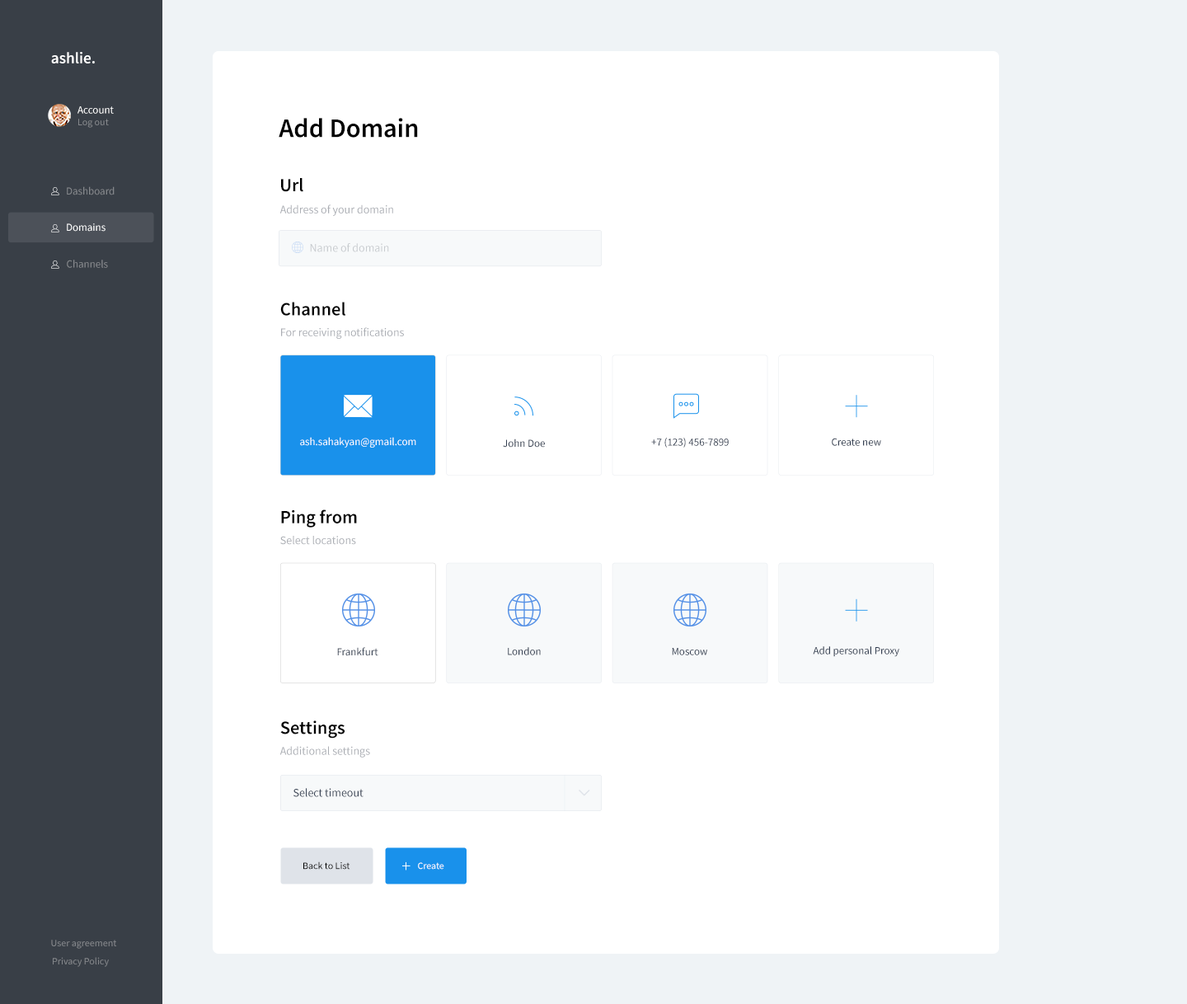
<style>
.page{position:relative;width:1187px;height:1004px;background:#ffffff}
.page>*{position:absolute;margin:0}
.t1{font:15.9px "SourceSansPro-SemiBold";color:#ffffff}
.t2{font:10.7px "SourceSansPro-Regular";color:#ffffff}
.t3{font:9.9px "SourceSansPro-Regular";color:#85888c}
.t4{font:26.8px "SourceSansPro-SemiBold";color:#000000}
.t5{font:18.6px "SourceSansPro-SemiBold";color:#000000}
.t6{font:10.7px "SourceSansPro-Regular";color:#85888c}
.t7{font:11.5px "SourceSansPro-Regular";color:#abaeb4}
.t8{font:11.5px "SourceSansPro-Regular";color:#c8cccf}
.t9{font:10.7px "SourceSansPro-Regular";color:#354052}
.t10{font:11.5px "SourceSansPro-Regular";color:#354052}
.t11{font:9.9px "SourceSansPro-Regular";color:#000000}
.t12{font:9.9px "SourceSansPro-Regular";color:#ffffff}
</style>
<div class="page">
<p class="t1" style="left:51px;top:52px;width:44px;height:11px">ashlie.</p>
<p class="t2" style="left:78px;top:106px;width:36px;height:8px">Account</p>
<p class="t3" style="left:78px;top:119px;width:31px;height:9px">Log out</p>
<p class="t4" style="left:279px;top:118px;width:139px;height:20px">Add Domain</p>
<p class="t5" style="left:281px;top:178px;width:22px;height:14px">Url</p>
<p class="t6" style="left:67px;top:186px;width:48px;height:9px">Dashboard</p>
<p class="t7" style="left:280px;top:204px;width:113px;height:12px">Address of your domain</p>
<p class="t2" style="left:67px;top:223px;width:39px;height:9px">Domains</p>
<p class="t8" style="left:310px;top:243px;width:79px;height:9px">Name of domain</p>
<p class="t6" style="left:67px;top:260px;width:41px;height:8px">Channels</p>
<p class="t5" style="left:280px;top:302px;width:65px;height:14px">Channel</p>
<p class="t7" style="left:281px;top:327px;width:123px;height:12px">For receiving notifications</p>
<p class="t2" style="left:300px;top:437px;width:116px;height:11px">ash.sahakyan@gmail.com</p>
<p class="t9" style="left:651px;top:438px;width:78px;height:10px">+7 (123) 456-7899</p>
<p class="t9" style="left:832px;top:438px;width:49px;height:8px">Create new</p>
<p class="t9" style="left:503px;top:439px;width:42px;height:9px">John Doe</p>
<p class="t5" style="left:281px;top:510px;width:76px;height:18px">Ping from</p>
<p class="t7" style="left:280px;top:536px;width:76px;height:9px">Select locations</p>
<p class="t9" style="left:337px;top:647px;width:41px;height:9px">Frankfurt</p>
<p class="t9" style="left:508px;top:647px;width:33px;height:9px">London</p>
<p class="t9" style="left:672px;top:648px;width:35px;height:8px">Moscow</p>
<p class="t9" style="left:813px;top:646px;width:87px;height:11px">Add personal Proxy</p>
<p class="t5" style="left:280px;top:721px;width:65px;height:18px">Settings</p>
<p class="t7" style="left:280px;top:746px;width:90px;height:12px">Additional settings</p>
<p class="t10" style="left:294px;top:788px;width:70px;height:9px">Select timeout</p>
<p class="t11" style="left:303px;top:862px;width:47px;height:8px">Back to List</p>
<p class="t12" style="left:418px;top:862px;width:26px;height:8px">Create</p>
<p class="t3" style="left:51px;top:940px;width:66px;height:9px">User agreement</p>
<p class="t3" style="left:53px;top:957px;width:56px;height:10px">Privacy Policy</p>
</div>
